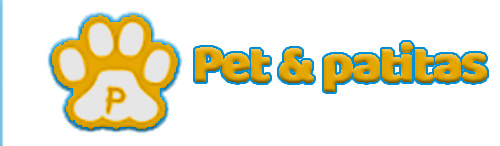
<style>
.page{position:relative;width:500px;height:146px;background:#ffffff}
.page>*{position:absolute;margin:0}
.t1{font:54.3px "Baloo-Regular";letter-spacing:-0.06em;font-weight:bold}
</style>
<div class="page">
<p class="t1" style="left:195px;top:42px;width:292px;height:50px">Pet &amp; patitas</p>
</div>
